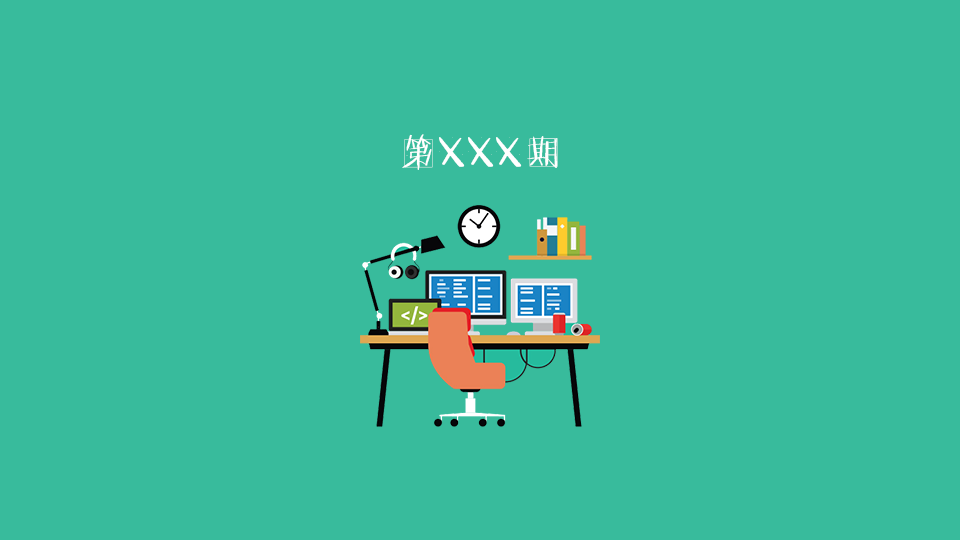
<style>
.page{position:relative;width:960px;height:540px;background:#38bb9c}
.page>*{position:absolute;margin:0}
.t1{font:38.9px "FZNHT";color:#ffffff}
</style>
<div class="page">
<p class="t1" style="left:402px;top:134px;width:156px;height:36px">第XXX期</p>
</div>
